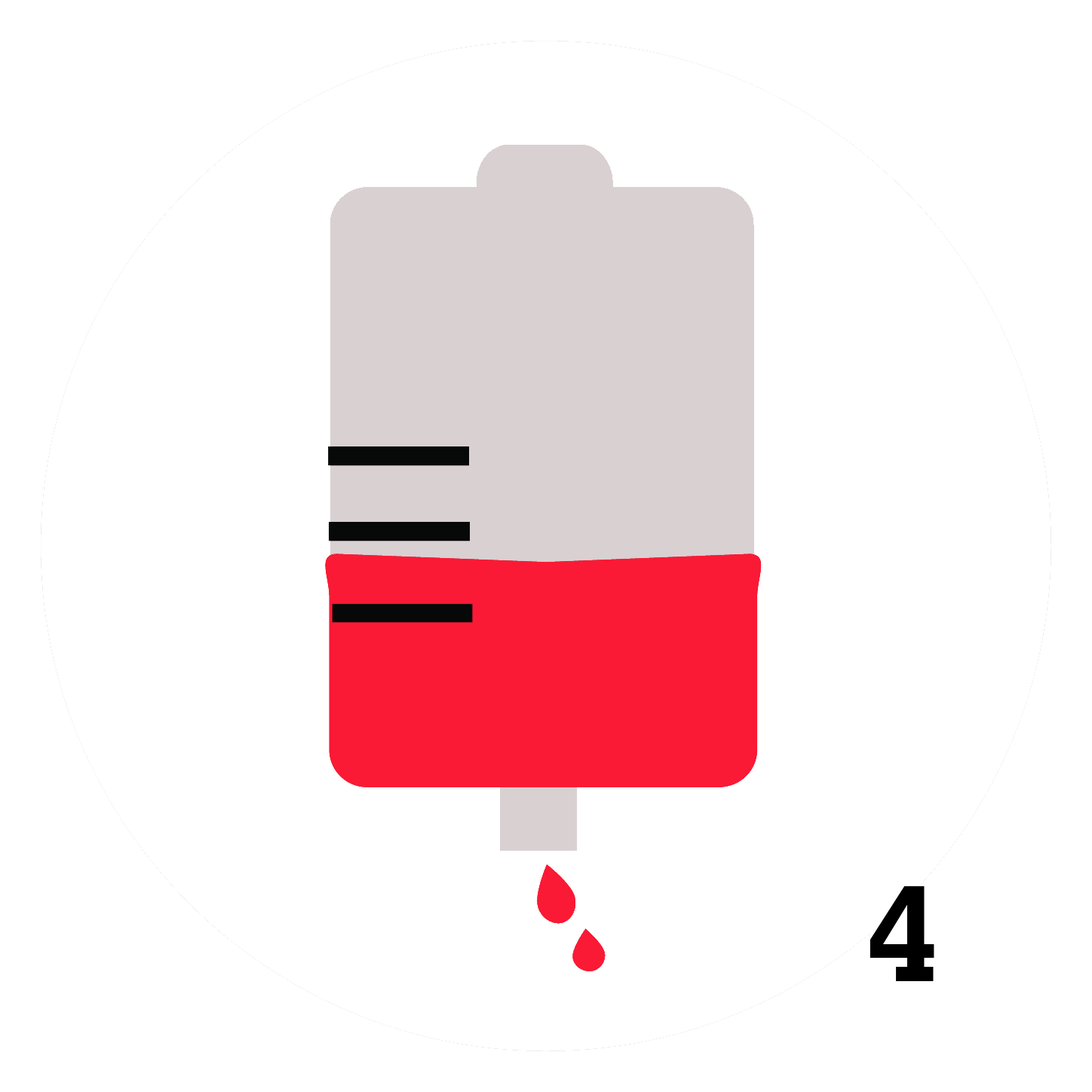
<style>
.page{position:relative;width:1092px;height:1092px;background:#ffffff}
.page>*{position:absolute;margin:0}
.t1{font:220px "DilleniaUPCBold";color:#000000}
</style>
<div class="page">
<p class="t1" style="left:870px;top:886px;width:64px;height:95px">4</p>
</div>
